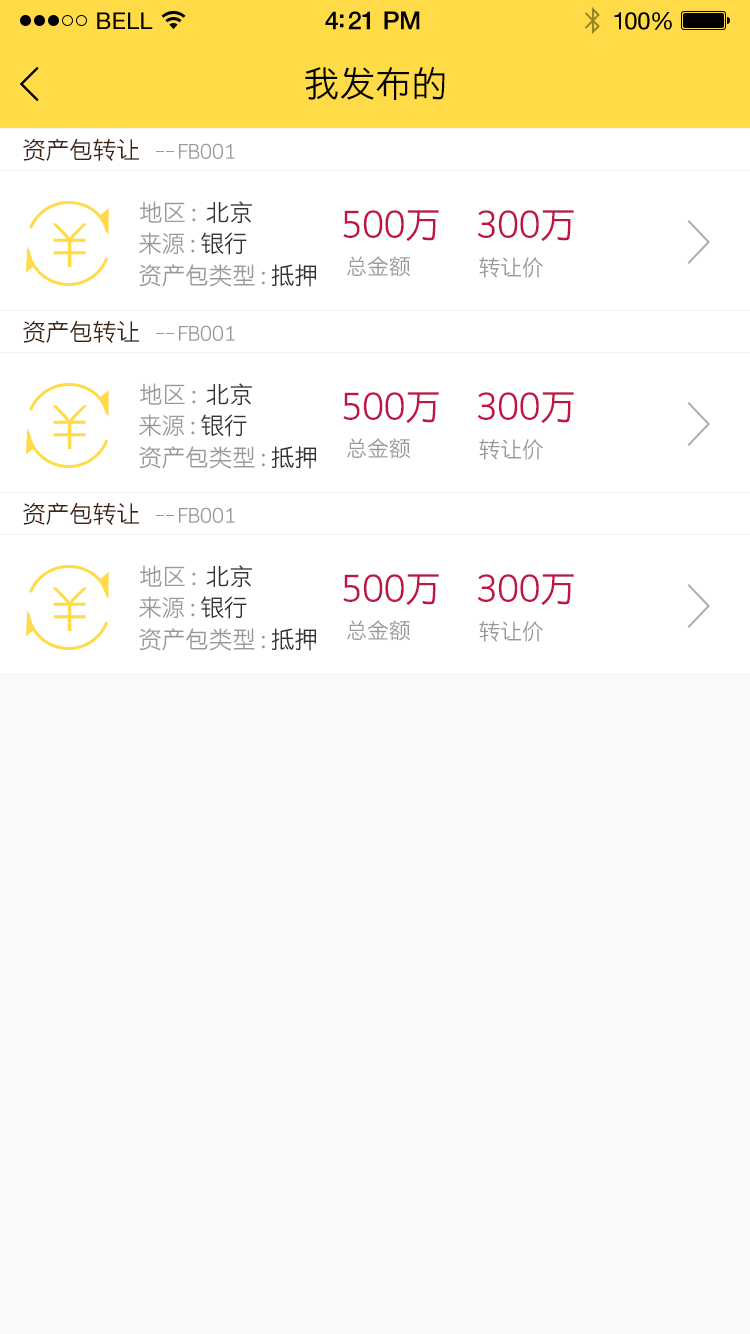
<style>
.page{position:relative;width:750px;height:1334px;background:#f9f9f9}
.page>*{position:absolute;margin:0}
.t1{font:23px "HelveticaNeue";letter-spacing:0.02em;color:#000000}
.t2{font:25px "HelveticaNeue-Medium";letter-spacing:-0.02em;color:#000000}
.t3{font:24px "HelveticaNeue";letter-spacing:-0.02em;color:#010101}
.t4{font:36px "STHeitiSC-Light";color:#000000}
.t5{font:24px "STHeitiSC-Light";letter-spacing:-0.02em;color:#41210f}
.t6{font:20px "STHeitiSC-Light";letter-spacing:-0.02em;color:#999999}
.t7{font:24px "STHeitiSC-Light";letter-spacing:-0.02em;color:#999999}
.t8{font:24px "STHeitiSC-Light";letter-spacing:-0.02em;color:#333333}
.t9{font:36px "STHeitiSC-Light";letter-spacing:-0.02em;color:#c01444}
.t10{font:22px "STHeitiSC-Light";letter-spacing:-0.02em;color:#999999}
</style>
<div class="page">
<p class="t1" style="left:97px;top:12px;width:56px;height:17px">BELL</p>
<p class="t1" style="left:97px;top:12px;width:56px;height:17px">BELL</p>
<p class="t2" style="left:325px;top:11px;width:95px;height:19px">4:21 PM</p>
<p class="t2" style="left:325px;top:11px;width:95px;height:19px">4:21 PM</p>
<p class="t3" style="left:614px;top:12px;width:58px;height:18px">100%</p>
<p class="t3" style="left:614px;top:12px;width:58px;height:18px">100%</p>
<p class="t4" style="left:305px;top:67px;width:140px;height:33px">我发布的</p>
<p class="t5" style="left:23px;top:138px;width:116px;height:23px">资产包转让</p>
<p class="t6" style="left:179px;top:143px;width:56px;height:16px">FB001</p>
<p class="t7" style="left:140px;top:201px;width:112px;height:23px">地区 :  <span class="t8">北京</span></p>
<p class="t9" style="left:343px;top:210px;width:96px;height:32px">500万</p>
<p class="t9" style="left:477px;top:210px;width:97px;height:32px">300万</p>
<p class="t7" style="left:139px;top:232px;width:108px;height:23px">来源 : <span class="t8">银行</span></p>
<p class="t10" style="left:347px;top:256px;width:63px;height:21px">总金额</p>
<p class="t10" style="left:479px;top:257px;width:64px;height:21px">转让价</p>
<p class="t7" style="left:139px;top:264px;width:177px;height:23px">资产包类型 : <span class="t8">抵押</span></p>
<p class="t5" style="left:23px;top:320px;width:116px;height:23px">资产包转让</p>
<p class="t6" style="left:179px;top:325px;width:56px;height:16px">FB001</p>
<p class="t7" style="left:140px;top:383px;width:112px;height:23px">地区 :  <span class="t8">北京</span></p>
<p class="t9" style="left:343px;top:392px;width:96px;height:32px">500万</p>
<p class="t9" style="left:477px;top:392px;width:97px;height:32px">300万</p>
<p class="t7" style="left:139px;top:414px;width:108px;height:23px">来源 : <span class="t8">银行</span></p>
<p class="t10" style="left:347px;top:438px;width:63px;height:21px">总金额</p>
<p class="t7" style="left:139px;top:446px;width:177px;height:23px">资产包类型 : <span class="t8">抵押</span></p>
<p class="t10" style="left:479px;top:439px;width:64px;height:21px">转让价</p>
<p class="t5" style="left:23px;top:502px;width:116px;height:23px">资产包转让</p>
<p class="t6" style="left:179px;top:507px;width:56px;height:16px">FB001</p>
<p class="t7" style="left:140px;top:565px;width:112px;height:23px">地区 :  <span class="t8">北京</span></p>
<p class="t9" style="left:343px;top:574px;width:96px;height:32px">500万</p>
<p class="t9" style="left:477px;top:574px;width:97px;height:32px">300万</p>
<p class="t7" style="left:139px;top:596px;width:108px;height:23px">来源 : <span class="t8">银行</span></p>
<p class="t7" style="left:139px;top:628px;width:177px;height:23px">资产包类型 : <span class="t8">抵押</span></p>
<p class="t10" style="left:347px;top:620px;width:63px;height:21px">总金额</p>
<p class="t10" style="left:479px;top:621px;width:64px;height:21px">转让价</p>
</div>
